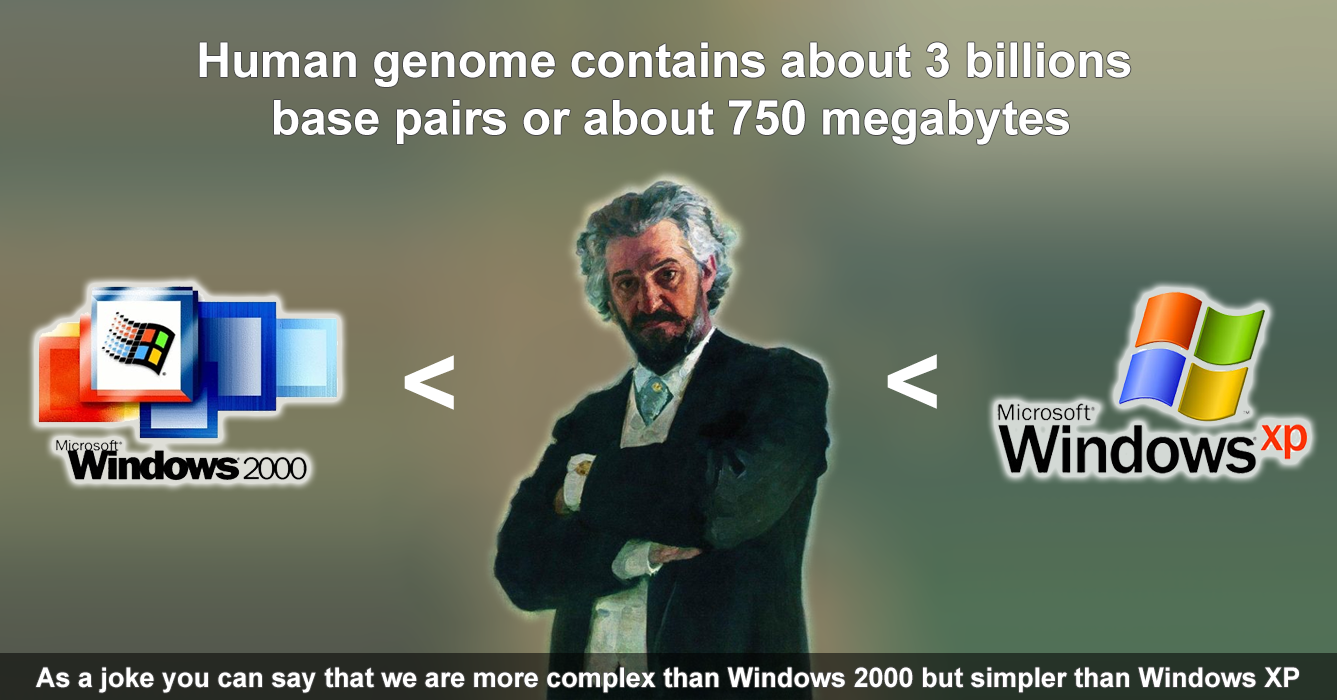
<style>
.page{position:relative;width:1337px;height:700px}
.page>*{position:absolute;margin:0}
.t1{font:48px "Arial-BoldMT";color:#ffffff}
.t2{font:100px "Arial-BoldMT";color:#ffffff}
.t3{font:27px "Arial-BoldMT";color:#ffffff}
</style>
<div class="page">
<p class="t1" style="left:199px;top:42px;width:932px;height:103px;text-align:center">Human genome contains about 3 billions <br>base pairs or about 750 megabytes</p>
<p class="t2" style="left:404px;top:355px;width:50px;height:55px">&lt;</p>
<p class="t2" style="left:887px;top:354px;width:50px;height:55px">&lt;</p>
<p class="t3" style="left:36px;top:667px;width:1263px;height:26px">As a joke you can say that we are more complex than Windows 2000 but simpler than Windows XP</p>
</div>
